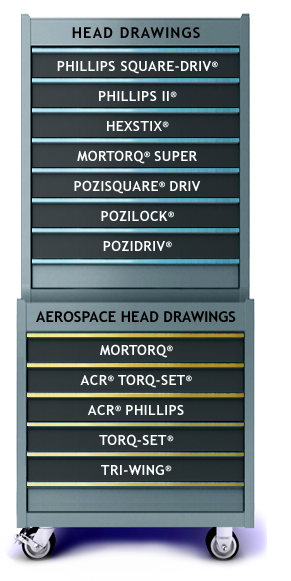
<style>
.page{position:relative;width:291px;height:581px;background:#ffffff}
.page>*{position:absolute;margin:0}
.t1{font:15px "TrebuchetMS-Bold";letter-spacing:0.075em;color:#000000;text-transform:uppercase}
.t2{font:14px/30px "TrebuchetMS-Bold";letter-spacing:0.025em;color:#ffffff;text-transform:uppercase}
.t3{font:15px "TrebuchetMS-Bold";color:#000000;text-transform:uppercase}
</style>
<div class="page">
<p class="t1" style="left:72px;top:27px;width:128px;height:11px">HEAD DRAWINGS</p>
<p class="t2" style="left:57px;top:60px;width:161px;height:191px;text-align:center">PHILLIPS SQUARE-DRIV®<br>PHILLIPS II®<br>HEXSTIX®<br>MORTORQ® SUPER<br>POZISQUARE® DRIV<br>POZILOCK®<br>POZIDRIV®</p>
<p class="t3" style="left:36px;top:311px;width:200px;height:11px">AEROSPACE HEAD DRAWINGS</p>
<p class="t2" style="left:80px;top:344px;width:112px;height:131px;text-align:center">MORTORQ®<br>ACR® TORQ-SET®<br>ACR® PHILLIPS<br>TORQ-SET®<br>TRI-WING®</p>
</div>
